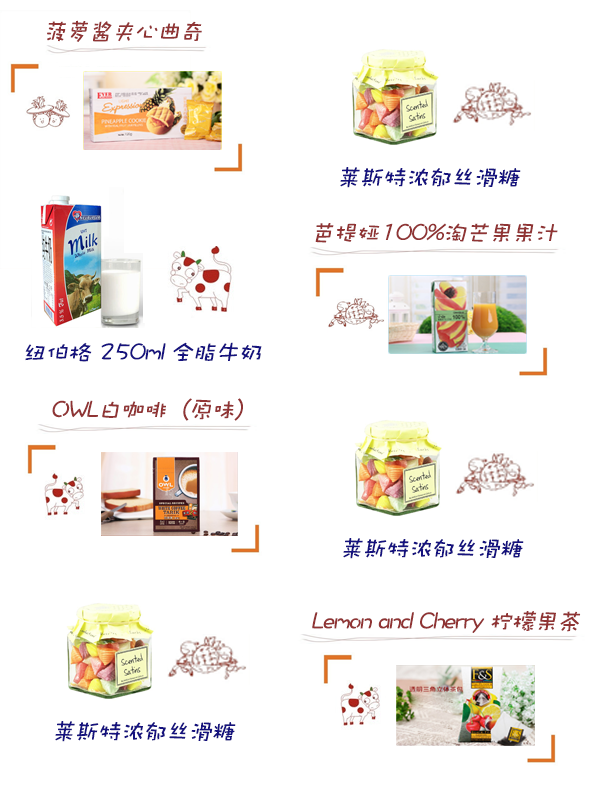
<style>
.page{position:relative;width:595px;height:808px;background:#ffffff}
.page>*{position:absolute;margin:0}
.t1{font:24px "DFWaWaSC-W5";letter-spacing:-0.05em;color:#903434;font-style:italic}
.t2{font:24px "DFWaWaSC-W5";letter-spacing:-0.05em;color:#15127e;font-style:italic}
</style>
<div class="page">
<p class="t1" style="left:47px;top:20px;width:155px;height:22px">菠萝酱夹心曲奇</p>
<p class="t2" style="left:340px;top:167px;width:181px;height:21px">莱斯特浓郁丝滑糖</p>
<p class="t1" style="left:315px;top:223px;width:243px;height:20px">芭提娅100%淘芒果果汁</p>
<p class="t2" style="left:25px;top:342px;width:237px;height:20px">纽伯格 250ml 全脂牛奶</p>
<p class="t1" style="left:52px;top:398px;width:191px;height:23px">OWL白咖啡（原味）</p>
<p class="t2" style="left:343px;top:538px;width:181px;height:21px">莱斯特浓郁丝滑糖</p>
<p class="t1" style="left:312px;top:611px;width:269px;height:22px">Lemon and Cherry 柠檬果茶</p>
<p class="t2" style="left:55px;top:721px;width:181px;height:21px">莱斯特浓郁丝滑糖</p>
</div>
